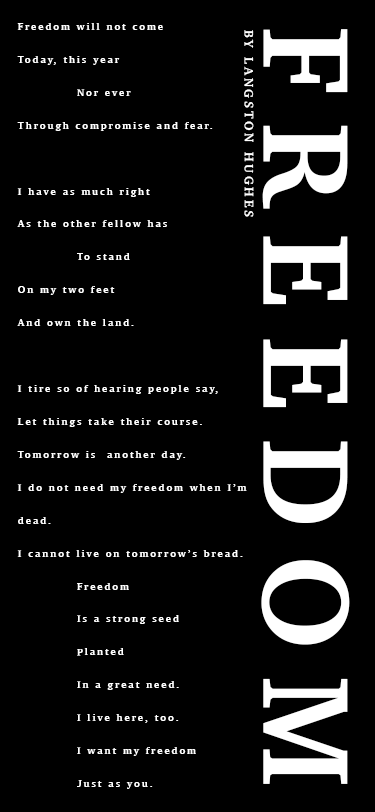
<style>
.page{position:relative;width:375px;height:812px;background:#000000}
.page>*{position:absolute;margin:0}
.t1{font:9.6px/32.9px "Charter-Bold";letter-spacing:0.22em;color:#ffffff}
.t2{font:12.5px "Charter-Bold";letter-spacing:0.22em;color:#ffffff}
.t3{font:125px "Charter-Bold";letter-spacing:0.22em;color:#ffffff}
</style>
<div class="page">
<p class="t1" style="left:17px;top:23px;width:230px;height:766px">Freedom will not come<br>Today, this year<br>            Nor ever<br>Through compromise and fear.<br> <br>I have as much right<br>As the other fellow has<br>            To stand<br>On my two feet<br>And own the land.<br> <br>I tire so of hearing people say,<br>Let things take their course.<br>Tomorrow is another day.<br>I do not need my freedom when I’m dead.<br>I cannot live on tomorrow’s bread.<br>            Freedom<br>            Is a strong seed<br>            Planted<br>            In a great need.<br>            I live here, too.<br>            I want my freedom<br>            Just as you.</p>
<p class="t2" style="left:244px;top:30px;width:10px;height:187px;rotate:90deg">BY LANGSTON HUGHES</p>
<p class="t3" style="left:261px;top:29px;width:89px;height:755px;rotate:90deg">FREEDOM</p>
</div>
